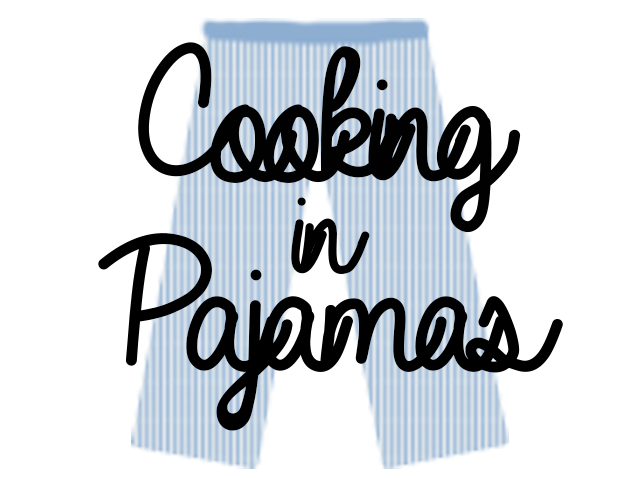
<style>
.page{position:relative;width:640px;height:478px;background:#ffffff}
.page>*{position:absolute;margin:0}
.t1{font:200px "Always-In-My-Heart";letter-spacing:-0.08em;color:#010101}
.t2{font:150px "Always-In-My-Heart";letter-spacing:-0.08em;color:#000000}
.t3{font:200px "Always-In-My-Heart";letter-spacing:-0.08em;color:#000000}
</style>
<div class="page">
<p class="t1" style="left:138px;top:42px;width:383px;height:191px">Cooking</p>
<p class="t2" style="left:291px;top:197px;width:79px;height:77px">in</p>
<p class="t3" style="left:98px;top:233px;width:465px;height:198px">Pajamas</p>
</div>
